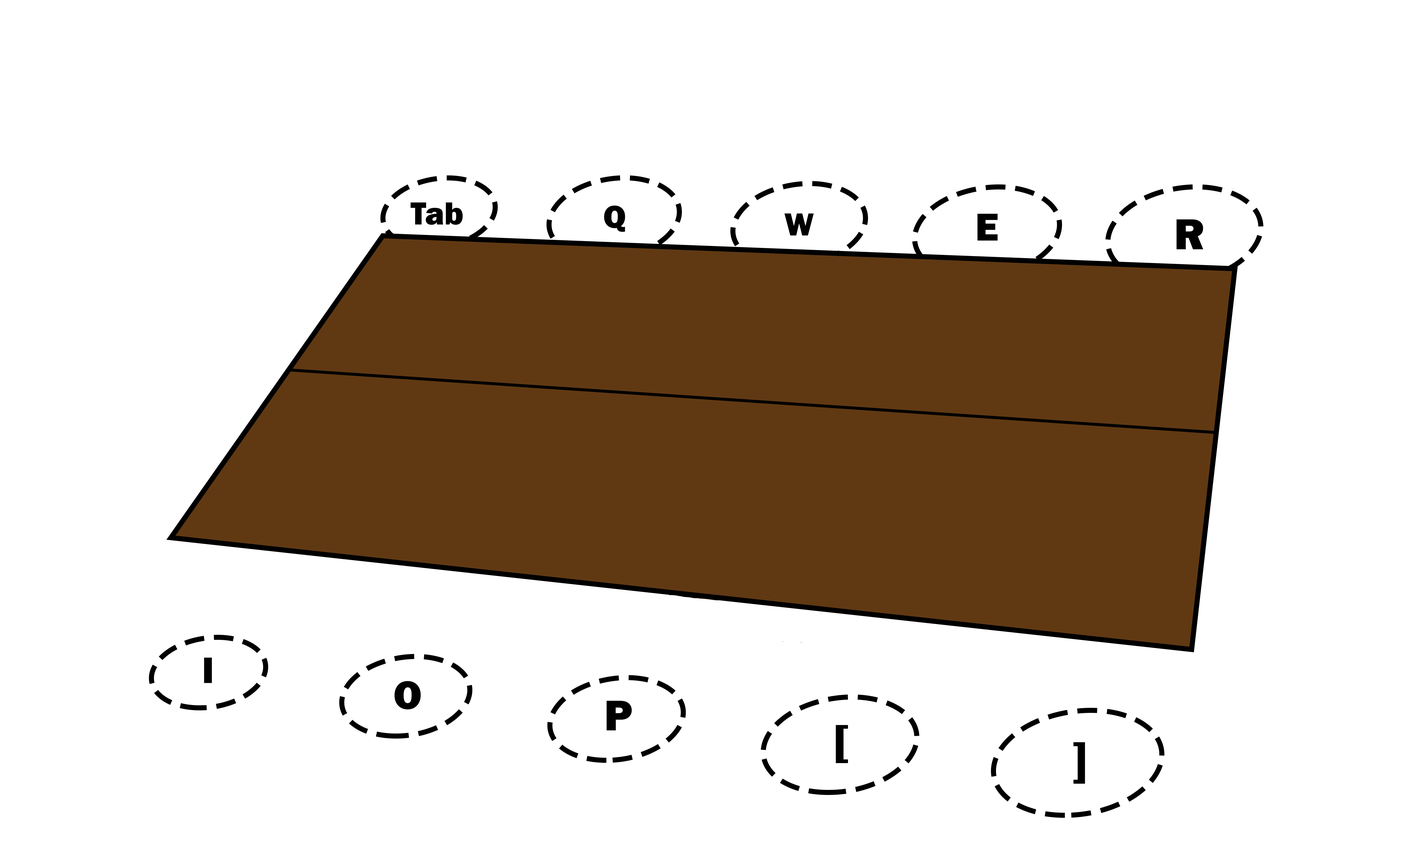
<style>
.page{position:relative;width:1410px;height:846px;background:#ffffff}
.page>*{position:absolute;margin:0}
.t1{font:33px "FranklinGothic-Heavy";color:#000000}
.t2{font:40.3px "FranklinGothic-Heavy";color:#000000}
.t3{font:44.8px "FranklinGothic-Heavy";color:#000000}
.t4{font:38.1px "FranklinGothic-Heavy";color:#000000}
.t5{font:41.1px "FranklinGothic-Heavy";color:#000000}
.t6{font:44.5px "FranklinGothic-Heavy";color:#000000}
.t7{font:46.2px "FranklinGothic-Heavy";color:#000000;scale:1.14 1}
.t8{font:50.2px "FranklinGothic-Heavy";color:#000000}
</style>
<div class="page">
<p class="t1" style="left:411px;top:202px;width:52px;height:23px">Tab</p>
<p class="t1" style="left:604px;top:206px;width:21px;height:26px">Q</p>
<p class="t1" style="left:784px;top:213px;width:30px;height:22px">W</p>
<p class="t2" style="left:977px;top:214px;width:21px;height:27px">E</p>
<p class="t3" style="left:1176px;top:219px;width:27px;height:30px">R</p>
<p class="t4" style="left:204px;top:658px;width:8px;height:25px">I</p>
<p class="t5" style="left:394px;top:681px;width:27px;height:28px">O</p>
<p class="t6" style="left:606px;top:701px;width:26px;height:29px">P</p>
<p class="t7" style="left:835px;top:725px;width:13px;height:38px">]</p>
<p class="t8" style="left:1073px;top:742px;width:12px;height:42px">[</p>
</div>
